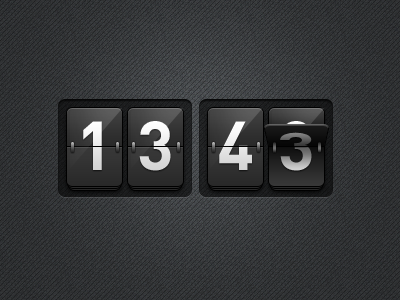
<style>
.page{position:relative;width:400px;height:300px}
.page>*{position:absolute;margin:0}
.t1{font:68px "DINPro-Bold";color:#efefef}
.t2{font:68px "DINPro-Bold";color:#e9e9e9}
.t3{font:68px "DINPro-Bold";color:#e0e0e0}
.t4{font:68px "DINPro-Bold"}
</style>
<div class="page">
<p class="t1" style="left:83px;top:121px;width:19px;height:49px">1</p>
<p class="t2" style="left:139px;top:121px;width:32px;height:50px">3</p>
<p class="t3" style="left:219px;top:121px;width:33px;height:49px">4</p>
<p class="t4" style="left:280px;top:121px;width:32px;height:50px">3</p>
</div>
